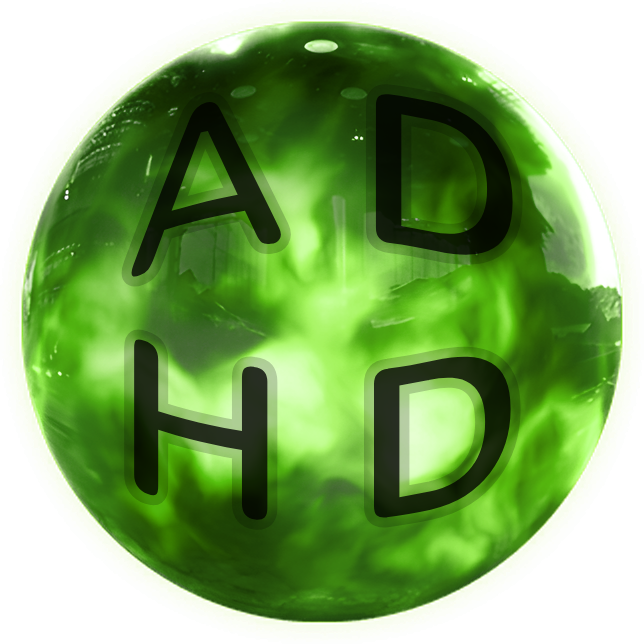
<style>
.page{position:relative;width:644px;height:644px;background:#ffffff}
.page>*{position:absolute;margin:0}
.t1{font:225px "Nunito-ExtraBold"}
</style>
<div class="page">
<p class="t1" style="left:120px;top:82px;width:403px;height:206px">A D</p>
<p class="t1" style="left:124px;top:326px;width:397px;height:205px">H D</p>
</div>
